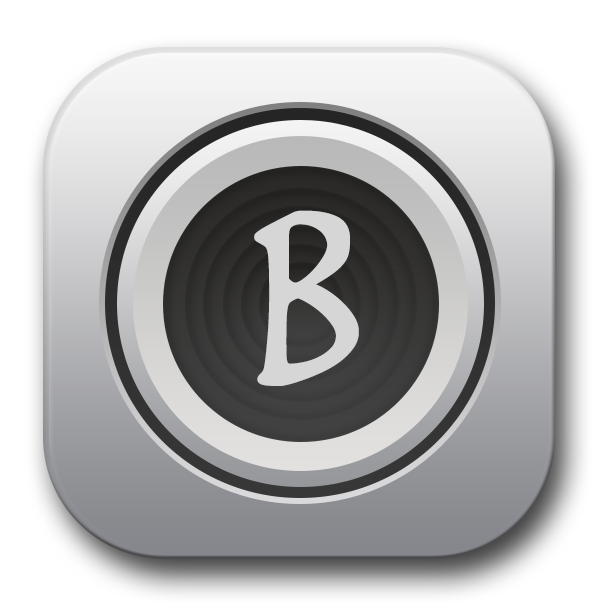
<style>
.page{position:relative;width:603px;height:603px}
.page>*{position:absolute;margin:0}
.t1{font:288px "Herculanum";color:#d6d6d6;font-weight:bold}
</style>
<div class="page">
<p class="t1" style="left:254px;top:210px;width:105px;height:176px">B</p>
</div>
